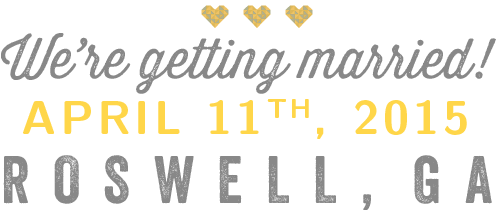
<style>
.page{position:relative;width:497px;height:210px;background:#ffffff}
.page>*{position:absolute;margin:0}
.t1{font:55px "ThirstyRoughLtOne";color:#888888}
.t2{font:48px "CMUSansSerif-Bold";letter-spacing:0.075em;color:#ffd649}
.t3{font:65px "Veneer";letter-spacing:0.36em;color:#888888}
</style>
<div class="page">
<p class="t1" style="left:1px;top:33px;width:495px;height:61px">We’re getting married!</p>
<p class="t2" style="left:23px;top:99px;width:444px;height:40px">APRIL 11TH, 2015</p>
<p class="t3" style="left:3px;top:155px;width:489px;height:56px">ROSWELL,GA</p>
</div>
